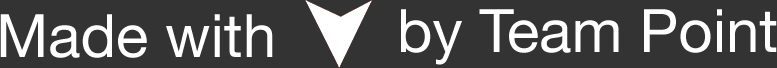
<style>
.page{position:relative;width:777px;height:68px;background:#333333}
.page>*{position:absolute;margin:0}
.t1{font:60px "HelveticaNeue";color:#ffffff}
</style>
<div class="page">
<p class="t1" style="left:0px;top:14px;width:273px;height:44px">Made with</p>
<p class="t1" style="left:401px;top:9px;width:376px;height:56px">by Team Point</p>
</div>
